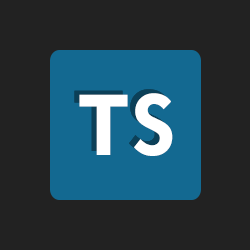
<style>
.page{position:relative;width:250px;height:250px;background:#222222}
.page>*{position:absolute;margin:0}
.t1{font:78px "Geometric212BT-HeavyCondensed";color:#ffffff}
</style>
<div class="page">
<p class="t1" style="left:79px;top:93px;width:94px;height:63px">TS</p>
</div>
